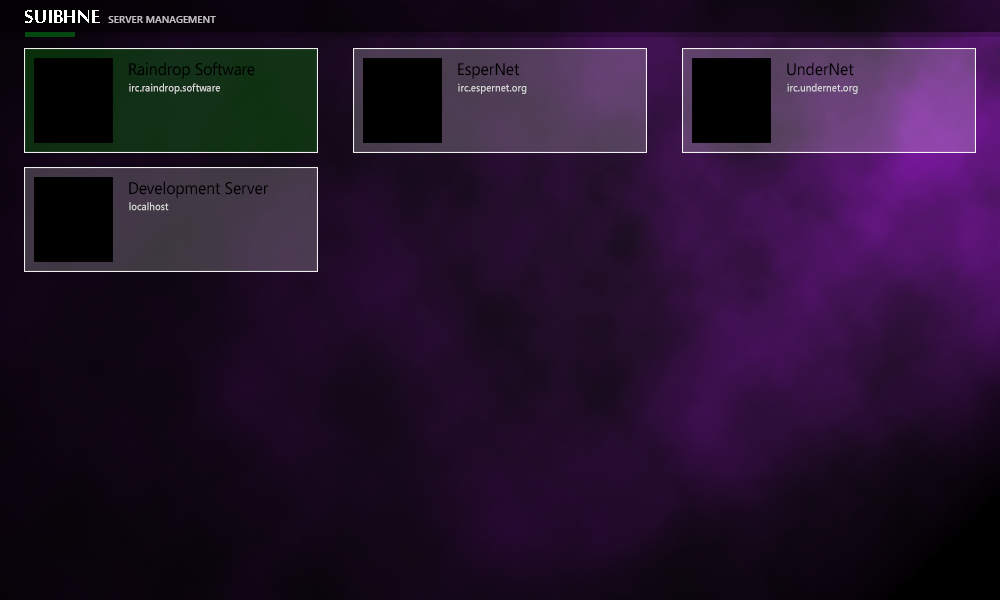
<style>
.page{position:relative;width:1000px;height:600px}
.page>*{position:absolute;margin:0}
.t1{font:26px "SakkalMajalla-Bold";color:#ffffff;scale:0.94 1}
.t2{font:10px "SegoeUI-Semibold";color:#bdbdbd}
.t3{font:16.7px "SegoeUI";color:#000000;scale:0.94 1}
.t4{font:10.4px "SegoeUI-Semibold";color:#d9d9d9;scale:0.94 1}
</style>
<div class="page">
<p class="t1" style="left:25px;top:10px;width:75px;height:13px">SUIBHNE</p>
<p class="t2" style="left:108px;top:16px;width:108px;height:7px">SERVER MANAGEMENT</p>
<p class="t3" style="left:129px;top:62px;width:126px;height:17px">Raindrop Software</p>
<p class="t3" style="left:458px;top:63px;width:61px;height:16px">EsperNet</p>
<p class="t3" style="left:787px;top:62px;width:67px;height:14px">UnderNet</p>
<p class="t4" style="left:129px;top:83px;width:91px;height:11px">irc.raindrop.software</p>
<p class="t4" style="left:458px;top:83px;width:69px;height:11px">irc.espernet.org</p>
<p class="t4" style="left:787px;top:83px;width:71px;height:11px">irc.undernet.org</p>
<p class="t3" style="left:129px;top:181px;width:140px;height:17px">Development Server</p>
<p class="t4" style="left:129px;top:202px;width:40px;height:9px">localhost</p>
</div>
